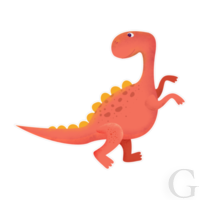
<style>
.page{position:relative;width:200px;height:200px;background:#ffffff}
.page>*{position:absolute;margin:0}
.t1{font:42.5px "Cochin";color:#e0e0e0}
</style>
<div class="page">
<p class="t1" style="left:168px;top:168px;width:31px;height:31px;rotate:1deg">G</p>
</div>
